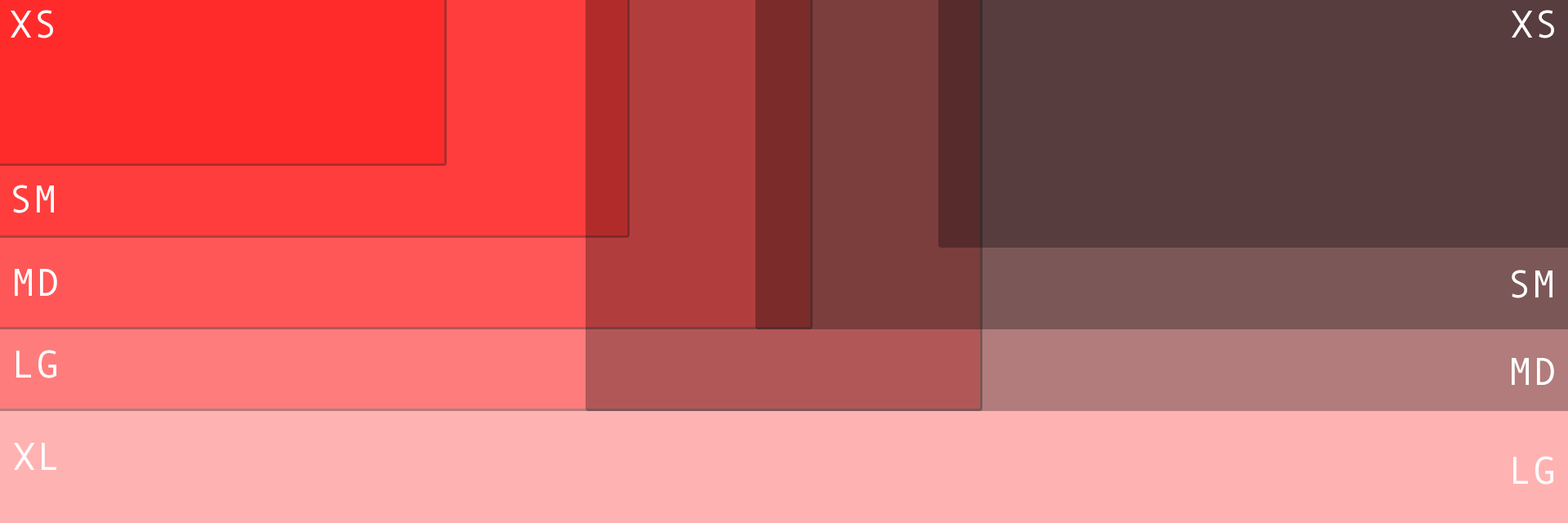
<style>
.page{position:relative;width:1568px;height:523px;background:#ffb2b2}
.page>*{position:absolute;margin:0}
.t1{font:39.2px "AndaleMono";letter-spacing:0.025em;color:#ffffff}
</style>
<div class="page">
<p class="t1" style="left:11px;top:10px;width:42px;height:28px">XS</p>
<p class="t1" style="left:1512px;top:10px;width:42px;height:28px">XS</p>
<p class="t1" style="left:13px;top:185px;width:41px;height:28px">SM</p>
<p class="t1" style="left:15px;top:269px;width:42px;height:27px">MD</p>
<p class="t1" style="left:1512px;top:270px;width:40px;height:28px">SM</p>
<p class="t1" style="left:16px;top:350px;width:40px;height:28px">LG</p>
<p class="t1" style="left:1512px;top:358px;width:42px;height:27px">MD</p>
<p class="t1" style="left:14px;top:443px;width:42px;height:27px">XL</p>
<p class="t1" style="left:1513px;top:456px;width:40px;height:28px">LG</p>
</div>
